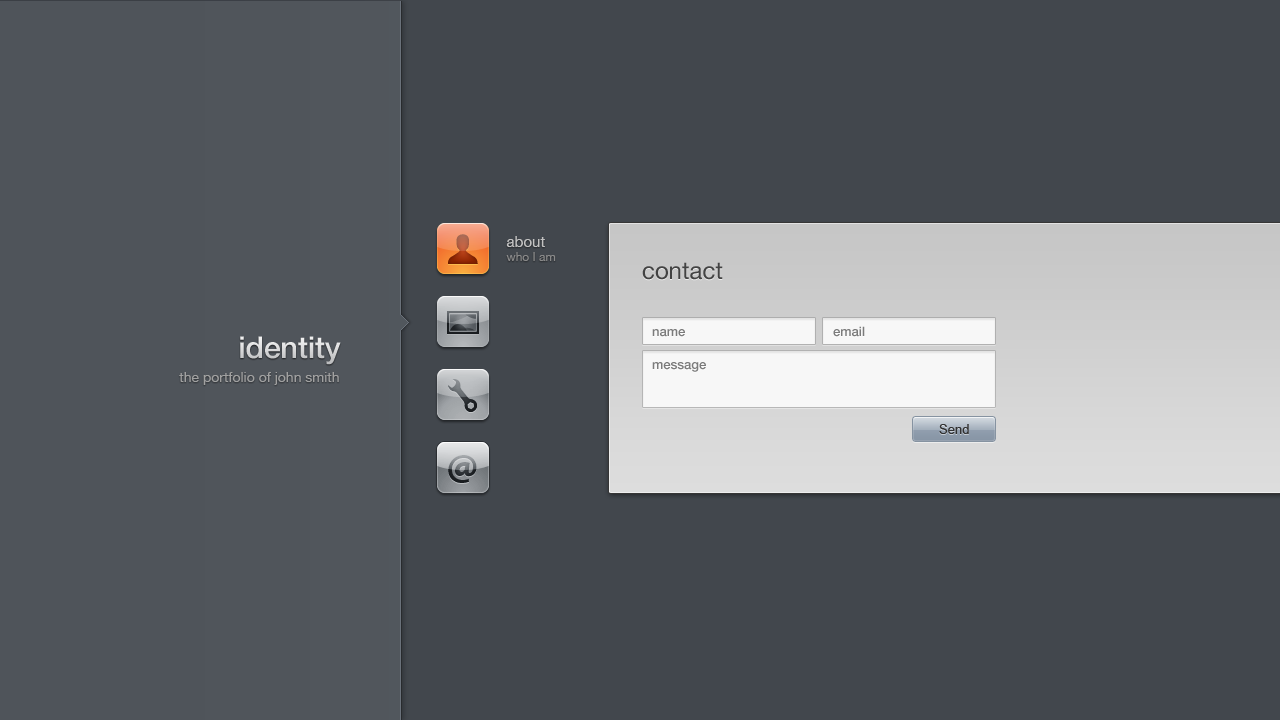
<style>
.page{position:relative;width:1280px;height:720px;background:#42474d}
.page>*{position:absolute;margin:0}
.t1{font:12px/14px "HelveticaNeue";color:#898989}
.t2{font:15px/14px "HelveticaNeue";color:#c2c2c2}
.t3{font:24px "HelveticaNeue";color:#434343}
.t4{font:13px "HelveticaNeue-Medium";color:#7b7b7b}
.t5{font:30px "HelveticaNeue-Medium";color:#d9dadb}
.t6{font:14px "HelveticaNeue";color:#a2a0a0}
.t7{font:13px "ArialMT";color:#313131}
</style>
<div class="page">
<p class="t1" style="left:506px;top:236px;width:50px;height:25px"><span class="t2">about<br></span>who I am</p>
<p class="t3" style="left:642px;top:262px;width:81px;height:18px">contact</p>
<p class="t4" style="left:652px;top:329px;width:33px;height:8px">name</p>
<p class="t4" style="left:833px;top:326px;width:32px;height:11px">email</p>
<p class="t5" style="left:240px;top:336px;width:101px;height:29px">identity</p>
<p class="t4" style="left:652px;top:362px;width:54px;height:10px">message</p>
<p class="t6" style="left:179px;top:372px;width:160px;height:13px">the portfolio of john smith</p>
<p class="t7" style="left:939px;top:424px;width:30px;height:10px">Send</p>
</div>
